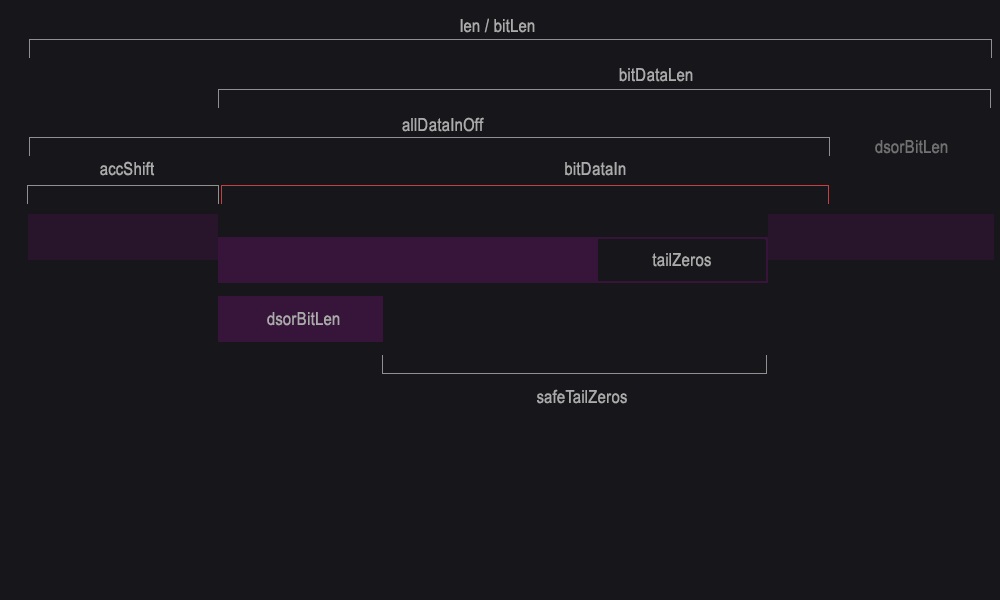
<style>
.page{position:relative;width:1000px;height:600px;background:#17171b}
.page>*{position:absolute;margin:0}
.t1{font:18px "ArialNarrow";letter-spacing:0.025em;color:#ababab}
.t2{font:18px "ArialNarrow";letter-spacing:0.025em;color:#717172}
</style>
<div class="page">
<p class="t1" style="left:460px;top:18px;width:75px;height:15px">len / bitLen</p>
<p class="t1" style="left:619px;top:68px;width:74px;height:14px">bitDataLen</p>
<p class="t1" style="left:402px;top:117px;width:82px;height:15px">allDataInOff</p>
<p class="t2" style="left:875px;top:140px;width:73px;height:14px">dsorBitLen</p>
<p class="t1" style="left:100px;top:161px;width:55px;height:15px">accShift</p>
<p class="t1" style="left:565px;top:162px;width:61px;height:14px">bitDataIn</p>
<p class="t1" style="left:652px;top:253px;width:59px;height:14px">tailZeros</p>
<p class="t1" style="left:267px;top:312px;width:73px;height:14px">dsorBitLen</p>
<p class="t1" style="left:537px;top:389px;width:90px;height:15px">safeTailZeros</p>
</div>
